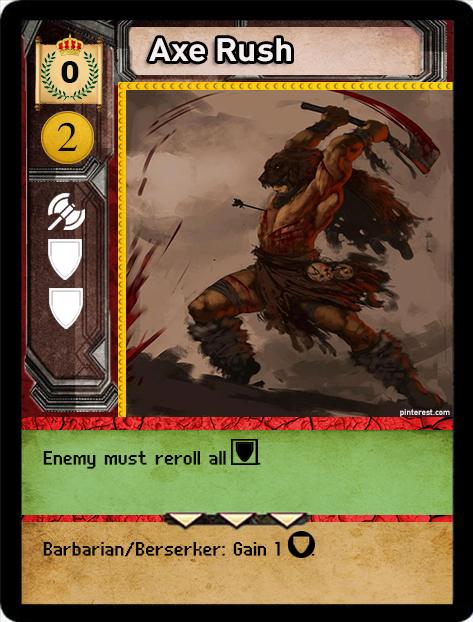
<style>
.page{position:relative;width:473px;height:622px}
.page>*{position:absolute;margin:0}
.t1{font:32px "DIN-Bold";color:#f6eff0;scale:1.06 1}
.t2{font:32px "Swiss721BT-Heavy";color:#090909}
.t3{font:40px "SimplifiedArabic";color:#090909;scale:1.05 1}
.t4{font:8px "DIN-Bold";color:#f6eff0}
.t5{font:24px "UNDA-BitmapFine";letter-spacing:0.01em;color:#060606;font-weight:bold}
</style>
<div class="page">
<p class="t1" style="left:149px;top:38px;width:142px;height:24px">Axe Rush</p>
<p class="t2" style="left:61px;top:61px;width:18px;height:22px">0</p>
<p class="t3" style="left:58px;top:122px;width:19px;height:29px">2</p>
<p class="t4" style="left:400px;top:409px;width:50px;height:8px">pinterest.com</p>
<p class="t5" style="left:43px;top:451px;width:218px;height:18px">Enemy must reroll all    .</p>
<p class="t5" style="left:43px;top:542px;width:272px;height:15px">Barbarian/Berserker: Gain 1    .</p>
</div>
